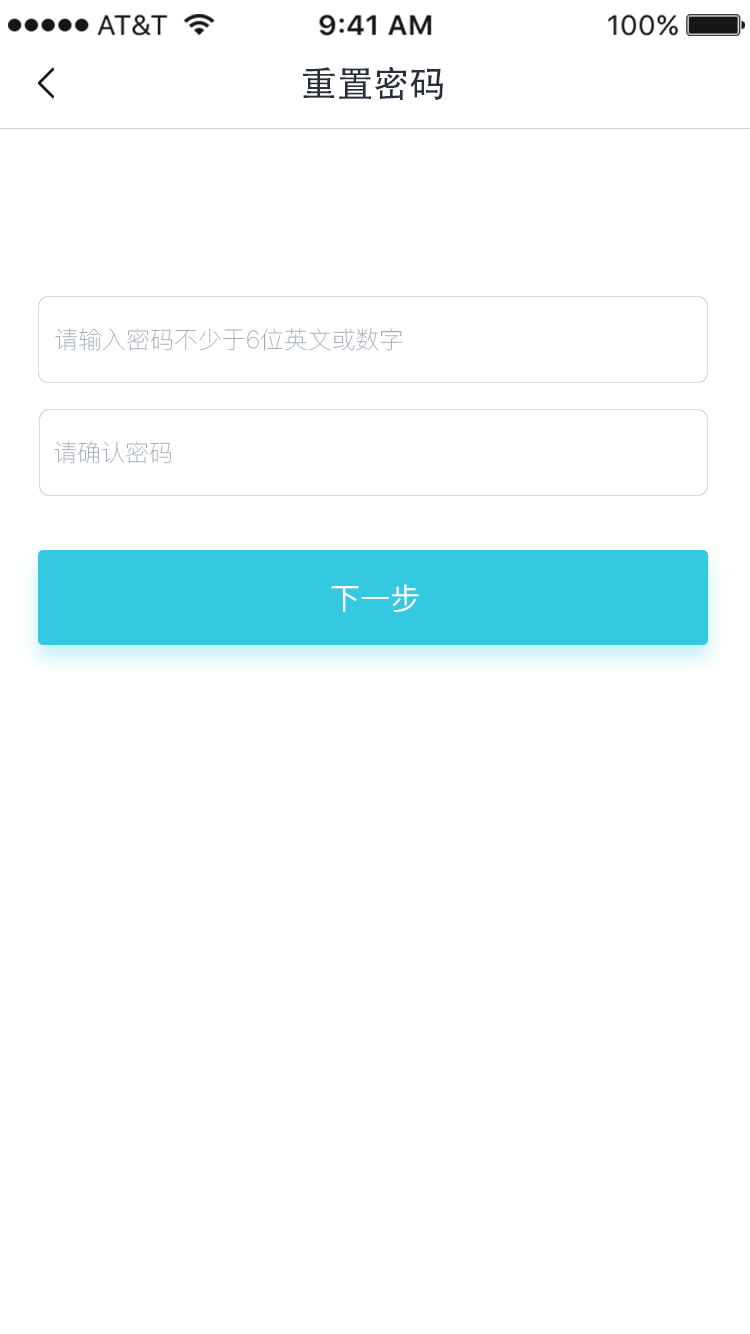
<style>
.page{position:relative;width:750px;height:1334px;background:#ffffff}
.page>*{position:absolute;margin:0}
.t1{font:36px "AdobeHeitiStd-Regular";color:#282e3a}
.t2{font:24px "PingFang-SC-ExtraLight";letter-spacing:0.01em;color:#96a0b2}
.t3{font:30px "PingFang-SC-Medium";letter-spacing:0.01em;color:#ffffff}
</style>
<div class="page">
<p class="t1" style="left:303px;top:66px;width:140px;height:34px">重置密码</p>
<p class="t2" style="left:55px;top:328px;width:347px;height:23px">请输入密码不少于6位英文或数字</p>
<p class="t2" style="left:54px;top:441px;width:117px;height:23px">请确认密码</p>
<p class="t3" style="left:331px;top:584px;width:88px;height:28px">下一步</p>
</div>
